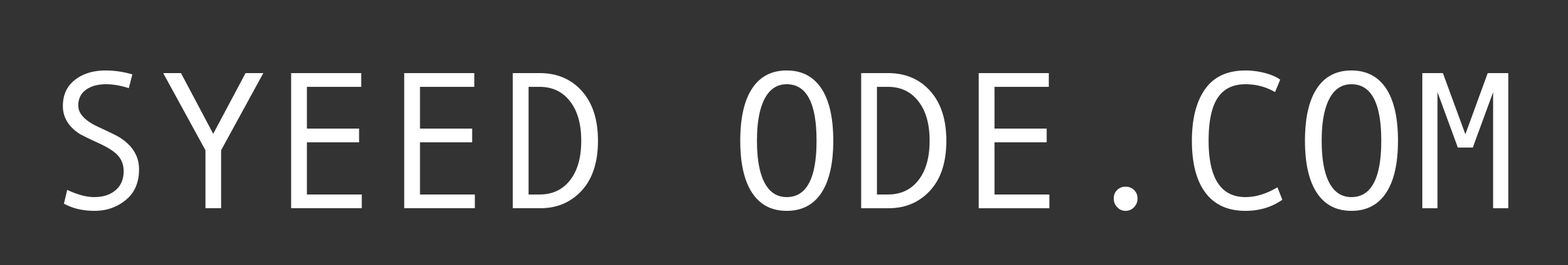
<style>
.page{position:relative;width:1568px;height:265px;background:#333333}
.page>*{position:absolute;margin:0}
.t1{font:196.1px "AndaleMono";color:#ffffff}
</style>
<div class="page">
<p class="t1" style="left:63px;top:71px;width:1446px;height:140px">SYEED ODE.COM</p>
</div>
